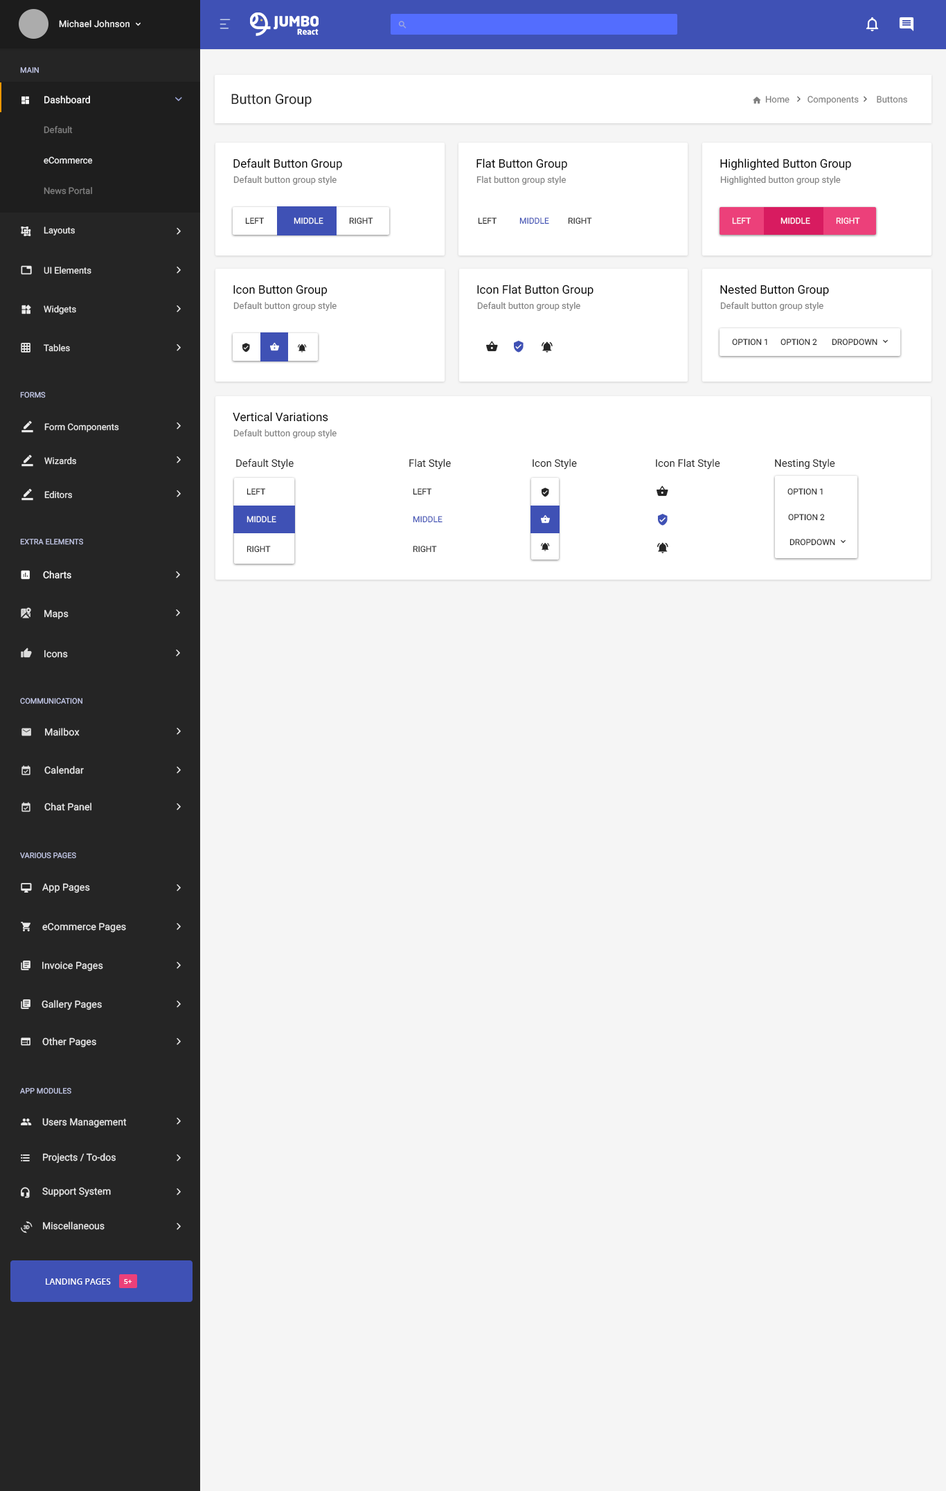
<style>
.page{position:relative;width:946px;height:1491px;background:#f5f5f5}
.page>*{position:absolute;margin:0}
.t1{font:9px "Roboto-Regular";letter-spacing:0.02em;color:#fafafa}
.t2{font:7.6px "Roboto-Regular";color:#c5cae9;text-transform:uppercase}
.t3{font:9.7px "Roboto-Regular";color:#ffffff}
.t4{font:13.8px "Roboto-Regular";color:#252525}
.t5{font:9px "Roboto-Regular";color:#808080}
.t6{font:9px/30.5px "Roboto-Regular";color:#808080}
.t7{font:9px/30.5px "Roboto-Regular";color:#f1f2f3}
.t8{font:11.8px "Roboto-Regular";color:#000000}
.t9{font:8.3px "Roboto-Regular";color:#252525;text-transform:uppercase}
.t10{font:8.3px "Roboto-Regular";color:#ffffff;text-transform:uppercase}
.t11{font:8.3px "Roboto-Regular";color:#3f51b5;text-transform:uppercase}
.t12{font:9px "Roboto-Regular";color:#ebebeb}
.t13{font:10.4px "Roboto-Regular";color:#252525}
.t14{font:9.7px "Roboto-Regular";color:#ebebeb}
.t15{font:8.3px "OpenSans-SemiBold";color:#ffffff;text-transform:uppercase}
.t16{font:6.9px "OpenSans-SemiBold";color:#ffffff;text-transform:uppercase}
</style>
<div class="page">
<p class="t1" style="left:59px;top:20px;width:70px;height:8px">Michael Johnson</p>
<p class="t2" style="left:20px;top:67px;width:19px;height:6px">main</p>
<p class="t3" style="left:44px;top:96px;width:46px;height:8px">Dashboard</p>
<p class="t4" style="left:231px;top:93px;width:81px;height:14px">Button Group</p>
<p class="t5" style="left:765px;top:96px;width:142px;height:9px">Home        Components        Buttons</p>
<p class="t6" style="left:44px;top:125px;width:49px;height:70px">Default<br><span class="t7">eCommerce<br></span>News Portal</p>
<p class="t8" style="left:233px;top:159px;width:109px;height:11px">Default Button Group</p>
<p class="t8" style="left:476px;top:159px;width:91px;height:11px">Flat Button Group</p>
<p class="t8" style="left:720px;top:159px;width:131px;height:11px">Highlighted Button Group</p>
<p class="t5" style="left:233px;top:175px;width:103px;height:10px">Default button group style</p>
<p class="t5" style="left:476px;top:176px;width:90px;height:9px">Flat button group style</p>
<p class="t5" style="left:720px;top:176px;width:120px;height:9px">Highlighted button group style</p>
<p class="t9" style="left:245px;top:217px;width:19px;height:7px">Left</p>
<p class="t10" style="left:294px;top:217px;width:29px;height:7px">Middle</p>
<p class="t9" style="left:349px;top:217px;width:24px;height:7px">Right</p>
<p class="t9" style="left:478px;top:217px;width:18px;height:7px">Left</p>
<p class="t11" style="left:519px;top:217px;width:30px;height:7px">Middle</p>
<p class="t9" style="left:568px;top:217px;width:24px;height:7px">Right</p>
<p class="t10" style="left:732px;top:217px;width:18px;height:7px">Left</p>
<p class="t10" style="left:780px;top:217px;width:30px;height:7px">Middle</p>
<p class="t10" style="left:836px;top:217px;width:24px;height:7px">Right</p>
<p class="t12" style="left:44px;top:226px;width:31px;height:9px">Layouts</p>
<p class="t12" style="left:44px;top:267px;width:47px;height:7px">UI Elements</p>
<p class="t8" style="left:233px;top:285px;width:94px;height:11px">Icon Button Group</p>
<p class="t8" style="left:477px;top:285px;width:116px;height:11px">Icon Flat Button Group</p>
<p class="t8" style="left:720px;top:285px;width:109px;height:11px">Nested Button Group</p>
<p class="t12" style="left:44px;top:305px;width:32px;height:9px">Widgets</p>
<p class="t5" style="left:233px;top:301px;width:103px;height:10px">Default button group style</p>
<p class="t5" style="left:477px;top:301px;width:103px;height:10px">Default button group style</p>
<p class="t5" style="left:720px;top:301px;width:103px;height:10px">Default button group style</p>
<p class="t9" style="left:732px;top:339px;width:35px;height:6px">option 1</p>
<p class="t9" style="left:780px;top:339px;width:37px;height:6px">option 2</p>
<p class="t9" style="left:831px;top:339px;width:46px;height:6px">dropdown</p>
<p class="t12" style="left:44px;top:344px;width:26px;height:8px">Tables</p>
<p class="t2" style="left:20px;top:391px;width:26px;height:7px">forms</p>
<p class="t8" style="left:233px;top:412px;width:95px;height:10px">Vertical Variations</p>
<p class="t12" style="left:44px;top:423px;width:75px;height:9px">Form Components</p>
<p class="t5" style="left:233px;top:429px;width:103px;height:9px">Default button group style</p>
<p class="t12" style="left:44px;top:457px;width:32px;height:8px">Wizards</p>
<p class="t13" style="left:236px;top:458px;width:58px;height:11px">Default Style</p>
<p class="t13" style="left:409px;top:458px;width:42px;height:11px">Flat Style</p>
<p class="t13" style="left:532px;top:458px;width:45px;height:11px">Icon Style</p>
<p class="t13" style="left:656px;top:458px;width:64px;height:11px">Icon Flat Style</p>
<p class="t13" style="left:775px;top:458px;width:60px;height:11px">Nesting Style</p>
<p class="t12" style="left:44px;top:491px;width:28px;height:7px">Editors</p>
<p class="t9" style="left:246px;top:488px;width:19px;height:7px">Left</p>
<p class="t9" style="left:413px;top:488px;width:18px;height:7px">Left</p>
<p class="t9" style="left:787px;top:488px;width:35px;height:7px">option 1</p>
<p class="t10" style="left:246px;top:516px;width:30px;height:7px">Middle</p>
<p class="t11" style="left:413px;top:516px;width:29px;height:7px">Middle</p>
<p class="t9" style="left:788px;top:514px;width:37px;height:7px">option 2</p>
<p class="t2" style="left:20px;top:538px;width:63px;height:7px">extra elements</p>
<p class="t9" style="left:246px;top:546px;width:25px;height:6px">Right</p>
<p class="t9" style="left:413px;top:546px;width:24px;height:6px">Right</p>
<p class="t9" style="left:789px;top:539px;width:46px;height:7px">dropdown</p>
<p class="t3" style="left:43px;top:570px;width:28px;height:9px">Charts</p>
<p class="t14" style="left:44px;top:609px;width:25px;height:10px">Maps</p>
<p class="t14" style="left:44px;top:649px;width:24px;height:9px">Icons</p>
<p class="t2" style="left:20px;top:697px;width:62px;height:7px">communication</p>
<p class="t14" style="left:45px;top:728px;width:35px;height:8px">Mailbox</p>
<p class="t14" style="left:44px;top:766px;width:40px;height:8px">Calendar</p>
<p class="t14" style="left:44px;top:802px;width:47px;height:9px">Chat Panel</p>
<p class="t2" style="left:20px;top:852px;width:56px;height:6px">various pages</p>
<p class="t14" style="left:42px;top:883px;width:48px;height:10px">App Pages</p>
<p class="t14" style="left:42px;top:922px;width:84px;height:11px">eCommerce Pages</p>
<p class="t14" style="left:42px;top:961px;width:61px;height:10px">Invoice Pages</p>
<p class="t14" style="left:42px;top:1000px;width:60px;height:10px">Gallery Pages</p>
<p class="t14" style="left:42px;top:1037px;width:54px;height:10px">Other Pages</p>
<p class="t2" style="left:20px;top:1087px;width:51px;height:7px">app modules</p>
<p class="t14" style="left:42px;top:1117px;width:85px;height:11px">Users Management</p>
<p class="t14" style="left:43px;top:1153px;width:73px;height:10px">Projects / To-dos</p>
<p class="t14" style="left:42px;top:1187px;width:69px;height:10px">Support System</p>
<p class="t14" style="left:43px;top:1221px;width:62px;height:9px">Miscellaneous</p>
<p class="t15" style="left:46px;top:1278px;width:65px;height:6px">Landing Pages</p>
<p class="t16" style="left:124px;top:1279px;width:8px;height:5px">5+</p>
</div>
